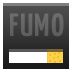
<style>
.page{position:relative;width:72px;height:72px;background:#ffffff}
.page>*{position:absolute;margin:0}
.t1{font:32px "YanoneKaffeesatz-Bold";letter-spacing:0.04em;color:#666666}
</style>
<div class="page">
<p class="t1" style="left:10px;top:13px;width:54px;height:24px">FUMO</p>
</div>
